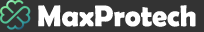
<style>
.page{position:relative;width:204px;height:32px;background:#333333}
.page>*{position:absolute;margin:0}
.t1{font:30px "BerlinSansFBDemi-Bold";color:#ffffff}
</style>
<div class="page">
<p class="t1" style="left:38px;top:5px;width:158px;height:22px">MaxProtech</p>
</div>
